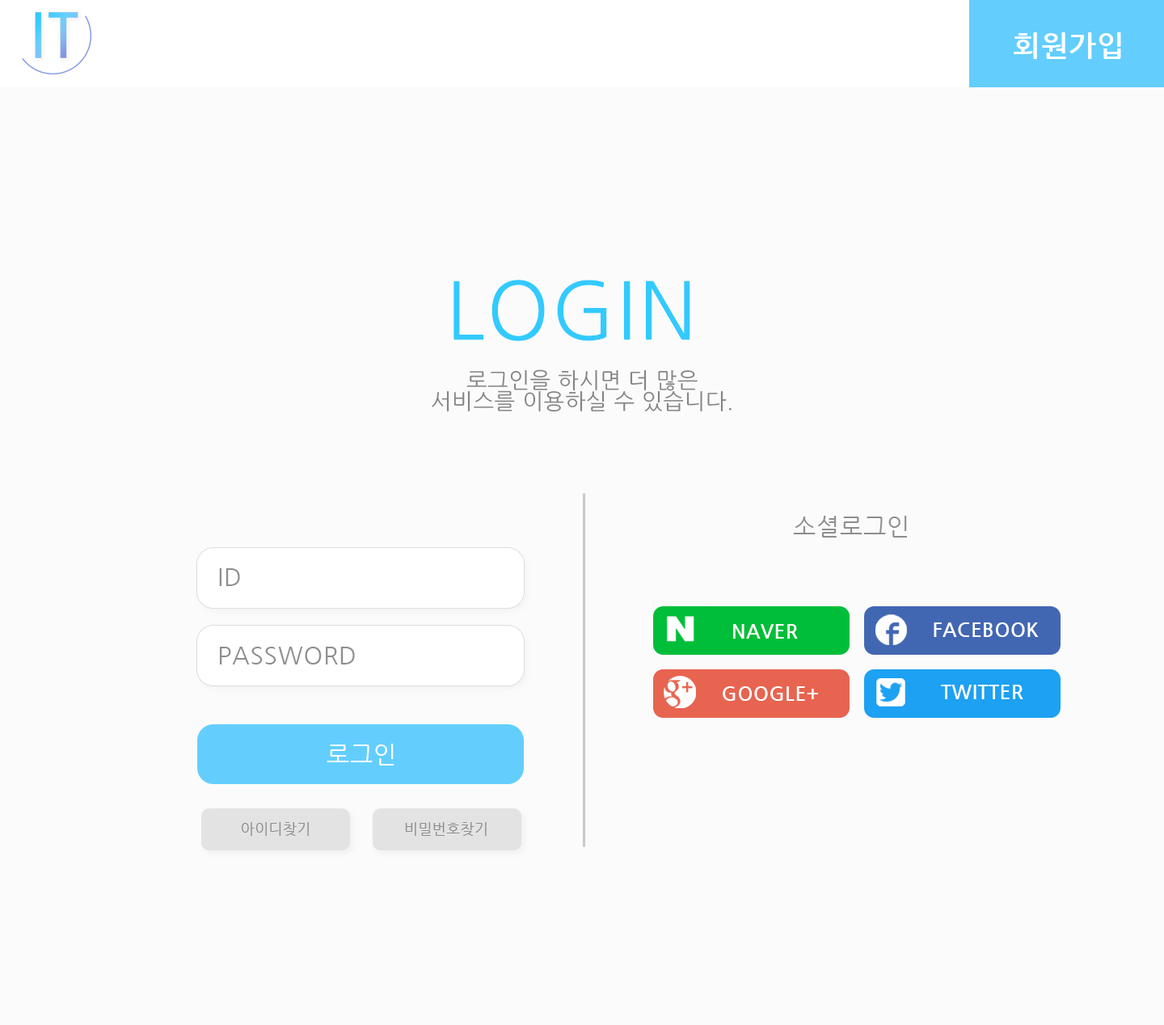
<style>
.page{position:relative;width:1164px;height:1025px;background:#fbfbfb}
.page>*{position:absolute;margin:0}
.t1{font:29.1px "NanumGothicBold";letter-spacing:0.025em;color:#ffffff}
.t2{font:79.2px "NanumGothic";letter-spacing:0.025em;color:#32caff}
.t3{font:21.8px/21px "NanumGothic";letter-spacing:0.025em;color:#848484}
.t4{font:24.2px "NanumGothic";letter-spacing:0.025em;color:#8e8e8e}
.t5{font:19.4px "NanumGothicBold";letter-spacing:0.025em;color:#ffffff}
.t6{font:24.2px "NanumGothic";letter-spacing:0.025em;color:#ffffff}
.t7{font:14.5px "NanumGothic";letter-spacing:0.025em;color:#8e8e8e}
</style>
<div class="page">
<p class="t1" style="left:1013px;top:32px;width:108px;height:27px">회원가입</p>
<p class="t2" style="left:453px;top:280px;width:237px;height:61px">LOGIN</p>
<p class="t3" style="left:432px;top:369px;width:299px;height:43px;text-align:center">로그인을 하시면 더 많은<br>서비스를 이용하실 수 있습니다.</p>
<p class="t4" style="left:793px;top:516px;width:115px;height:21px">소셜로그인</p>
<p class="t4" style="left:219px;top:568px;width:21px;height:18px">ID</p>
<p class="t5" style="left:733px;top:624px;width:65px;height:14px">NAVER</p>
<p class="t5" style="left:933px;top:622px;width:105px;height:15px">FACEBOOK</p>
<p class="t4" style="left:219px;top:646px;width:136px;height:18px">PASSWORD</p>
<p class="t5" style="left:722px;top:686px;width:96px;height:15px">GOOGLE+</p>
<p class="t5" style="left:941px;top:684px;width:82px;height:15px">TWITTER</p>
<p class="t6" style="left:326px;top:743px;width:68px;height:22px">로그인</p>
<p class="t7" style="left:242px;top:822px;width:67px;height:14px">아이디찾기</p>
<p class="t7" style="left:405px;top:822px;width:81px;height:14px">비밀번호찾기</p>
</div>
